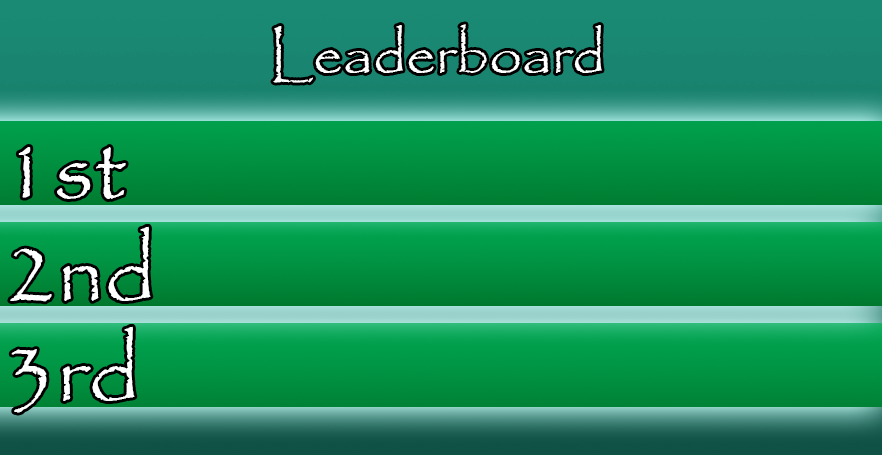
<style>
.page{position:relative;width:882px;height:455px}
.page>*{position:absolute;margin:0}
.t1{font:58.7px "Papyrus-Regular";color:#ffffff}
.t2{font:92.3px "Papyrus-Regular";color:#ffffff}
</style>
<div class="page">
<p class="t1" style="left:273px;top:24px;width:329px;height:59px">Leaderboard</p>
<p class="t2" style="left:18px;top:147px;width:108px;height:52px">1st</p>
<p class="t2" style="left:10px;top:226px;width:141px;height:76px">2nd</p>
<p class="t2" style="left:11px;top:326px;width:124px;height:87px">3rd</p>
</div>
